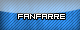
<style>
.page{position:relative;width:80px;height:30px}
.page>*{position:absolute;margin:0}
.t1{font:8px "04b08";color:#ffffff}
</style>
<div class="page">
<p class="t1" style="left:18px;top:14px;width:47px;height:5px">FANFARRE</p>
</div>
